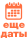
<style>
.page{position:relative;width:28px;height:38px;background:#ffffff}
.page>*{position:absolute;margin:0}
.t1{font:10px/8.4px "HelveticaNeueCyr-Black";color:#ff6f40}
</style>
<div class="page">
<p class="t1" style="left:0px;top:22px;width:27px;height:17px;text-align:center">еще<br>даты</p>
</div>
